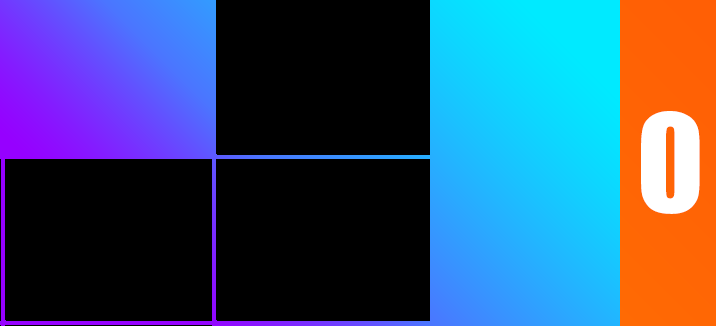
<style>
.page{position:relative;width:716px;height:326px;background:#000000}
.page>*{position:absolute;margin:0}
.t1{font:125px "Impact";color:#ffffff}
</style>
<div class="page">
<p class="t1" style="left:641px;top:111px;width:59px;height:103px">0</p>
</div>
